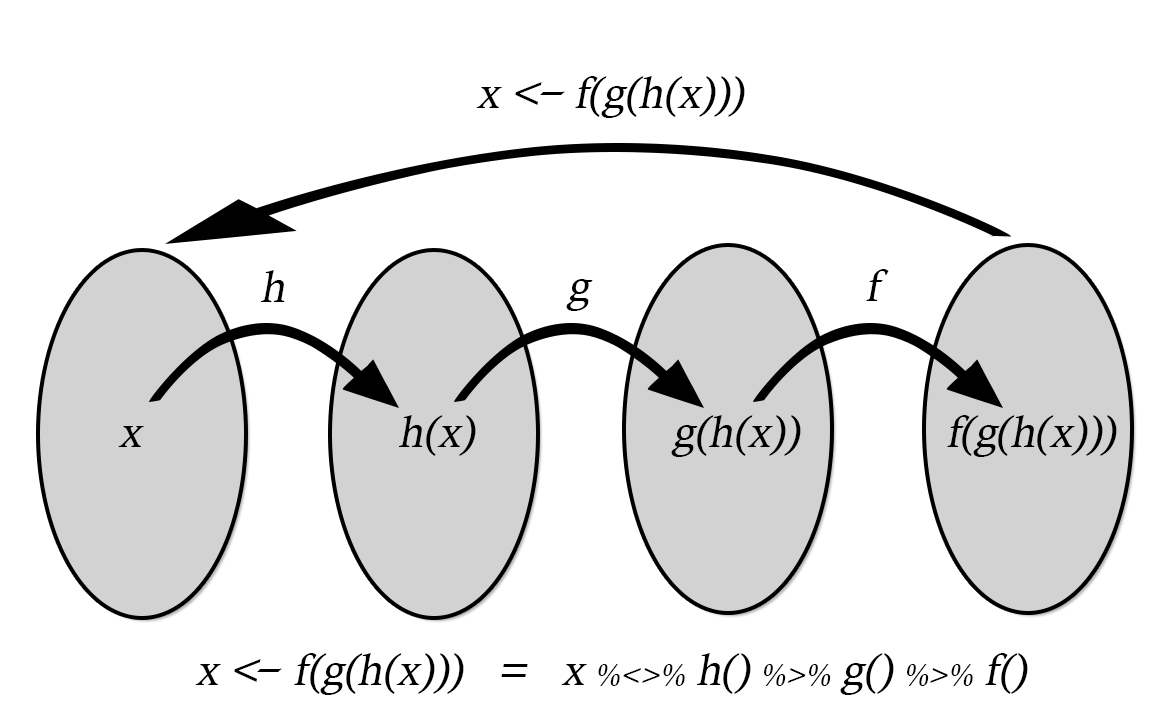
<style>
.page{position:relative;width:1159px;height:723px;background:#ffffff}
.page>*{position:absolute;margin:0}
.t1{font:44.6px "CalistoMT";color:#000000;font-style:italic}
.t2{font:44.6px "CalistoMT";color:#000000;font-style:italic;scale:2.18 1}
.t3{font:30px "CalistoMT";color:#000000;font-style:italic}
</style>
<div class="page">
<p class="t1" style="left:476px;top:76px;width:269px;height:42px">x &lt;   f(g(h(x)))</p>
<p class="t2" style="left:540px;top:91px;width:25px;height:4px">-</p>
<p class="t1" style="left:260px;top:270px;width:25px;height:32px">h</p>
<p class="t1" style="left:866px;top:269px;width:23px;height:32px">f</p>
<p class="t1" style="left:566px;top:279px;width:27px;height:32px">g</p>
<p class="t1" style="left:398px;top:415px;width:78px;height:41px">h(x)</p>
<p class="t1" style="left:671px;top:415px;width:130px;height:42px">g(h(x))</p>
<p class="t1" style="left:947px;top:415px;width:170px;height:42px">f(g(h(x)))</p>
<p class="t1" style="left:118px;top:426px;width:26px;height:21px">x</p>
<p class="t1" style="left:195px;top:653px;width:833px;height:42px">x &lt;   f(g(h(x)))   =   x <span class="t3">%&lt;&gt;%</span> h() <span class="t3">%&gt;%</span> g() <span class="t3">%&gt;%</span> f()</p>
<p class="t2" style="left:257px;top:668px;width:25px;height:4px">-</p>
</div>
